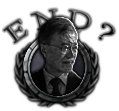
<style>
.page{position:relative;width:119px;height:111px;background:#ffffff}
.page>*{position:absolute;margin:0}
.t1{font:25px "TimesNewRomanPSMT"}
</style>
<div class="page">
<p class="t1" style="left:3px;top:9px;width:112px;height:35px">E N D ?</p>
</div>
